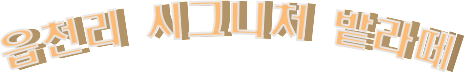
<style>
.page{position:relative;width:464px;height:73px;background:#ffffff}
.page>*{position:absolute;margin:0}
.t1{font:40px "HeadlineR-HM"}
</style>
<div class="page">
<p class="t1" style="left:0px;top:0px;width:457px;height:73px">읍천리 시그니처 밭라떼</p>
<p class="t1" style="left:8px;top:0px;width:457px;height:73px">읍천리 시그니처 밭라떼</p>
</div>
